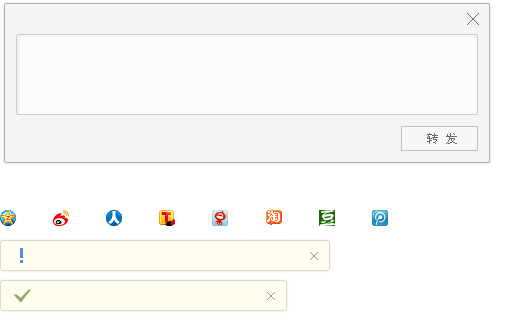
<style>
.page{position:relative;width:508px;height:320px;background:#ffffff}
.page>*{position:absolute;margin:0}
.t1{font:12px "SimSun";letter-spacing:0.02em;color:#666666}
</style>
<div class="page">
<p class="t1" style="left:427px;top:133px;width:30px;height:11px">转 发</p>
</div>
